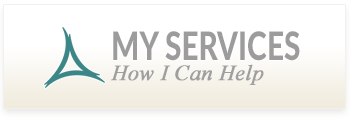
<style>
.page{position:relative;width:350px;height:122px;background:#ffffff}
.page>*{position:absolute;margin:0}
.t1{font:39px "Lato-Heavy";color:#9c9c9c;scale:0.77 1}
.t2{font:22px "TimesNewRomanPS-ItalicMT";color:#9f9f9f;font-weight:bold}
</style>
<div class="page">
<p class="t1" style="left:113px;top:31px;width:187px;height:30px">MY SERVICES</p>
<p class="t2" style="left:110px;top:64px;width:154px;height:21px">How I Can Help</p>
</div>
